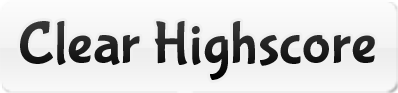
<style>
.page{position:relative;width:398px;height:93px}
.page>*{position:absolute;margin:0}
.t1{font:60px "BubblegumSans-Regular";color:#202020}
</style>
<div class="page">
<p class="t1" style="left:20px;top:21px;width:355px;height:59px">Clear Highscore</p>
</div>
